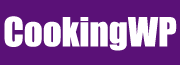
<style>
.page{position:relative;width:180px;height:65px;background:#5a1177}
.page>*{position:absolute;margin:0}
.t1{font:37px "Impact";color:#ffffff}
</style>
<div class="page">
<p class="t1" style="left:4px;top:16px;width:173px;height:35px">CookingWP</p>
</div>
